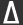
<style>
.page{position:relative;width:23px;height:25px;background:#333333}
.page>*{position:absolute;margin:0}
.t1{font:30.6px "AndaleMono";color:#ffffff;font-weight:bold;scale:0.9 1}
</style>
<div class="page">
<p class="t1" style="left:3px;top:1px;width:17px;height:23px;rotate:180deg">Δ</p>
</div>
